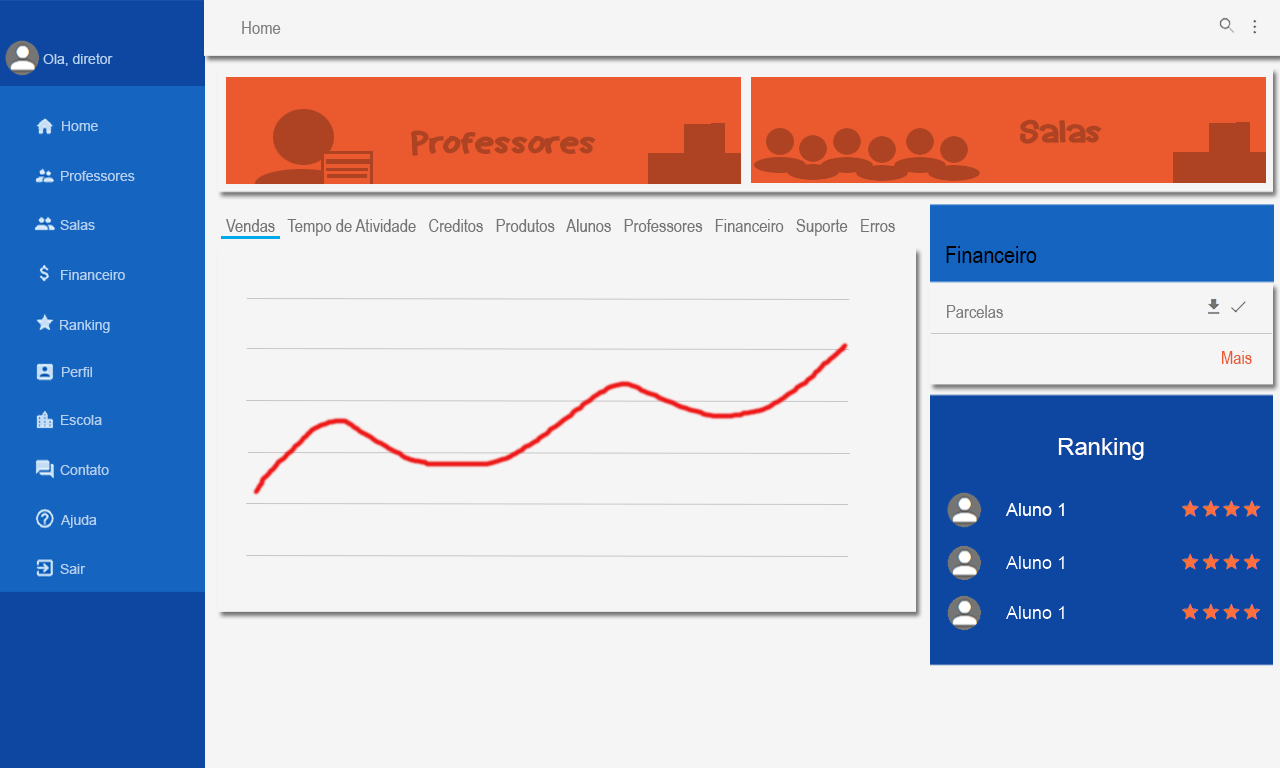
<style>
.page{position:relative;width:1280px;height:768px;background:#f5f5f5}
.page>*{position:absolute;margin:0}
.t1{font:18px "ArialNarrow";color:#7e7e7e}
.t2{font:14px "ArialMT";color:#b2d1f0}
.t3{font:36.1px "Animated";color:#ae4323;scale:1.2 1}
.t4{font:18px "ArialNarrow";color:#757575}
.t5{font:24px "ArialNarrow";color:#000000}
.t6{font:18px "ArialNarrow";color:#eb5a2e}
.t7{font:24px "ArialMT";color:#ffffff}
</style>
<div class="page">
<p class="t1" style="left:242px;top:21px;width:39px;height:13px">Home</p>
<p class="t2" style="left:43px;top:53px;width:70px;height:13px">Ola, diretor</p>
<p class="t2" style="left:62px;top:121px;width:36px;height:10px">Home</p>
<p class="t3" style="left:1020px;top:119px;width:82px;height:25px">Salas</p>
<p class="t3" style="left:411px;top:130px;width:185px;height:26px">Professores</p>
<p class="t2" style="left:61px;top:171px;width:74px;height:10px">Professores</p>
<p class="t2" style="left:60px;top:220px;width:35px;height:10px">Salas</p>
<p class="t4" style="left:226px;top:219px;width:669px;height:17px">Vendas   Tempo de Atividade   Creditos   Produtos   Alunos   Professores   Financeiro   Suporte   Erros</p>
<p class="t5" style="left:946px;top:246px;width:91px;height:17px">Financeiro</p>
<p class="t2" style="left:61px;top:270px;width:64px;height:10px">Financeiro</p>
<p class="t1" style="left:947px;top:305px;width:56px;height:13px">Parcelas</p>
<p class="t2" style="left:60px;top:320px;width:50px;height:13px">Ranking</p>
<p class="t6" style="left:1222px;top:351px;width:30px;height:13px">Mais</p>
<p class="t2" style="left:62px;top:367px;width:30px;height:10px">Perfil</p>
<p class="t2" style="left:61px;top:415px;width:41px;height:10px">Escola</p>
<p class="t7" style="left:1058px;top:438px;width:86px;height:22px">Ranking</p>
<p class="t2" style="left:60px;top:464px;width:49px;height:11px">Contato</p>
<p class="t2" style="left:61px;top:515px;width:36px;height:13px">Ajuda</p>
<p class="t2" style="left:60px;top:564px;width:26px;height:10px">Sair</p>
</div>
